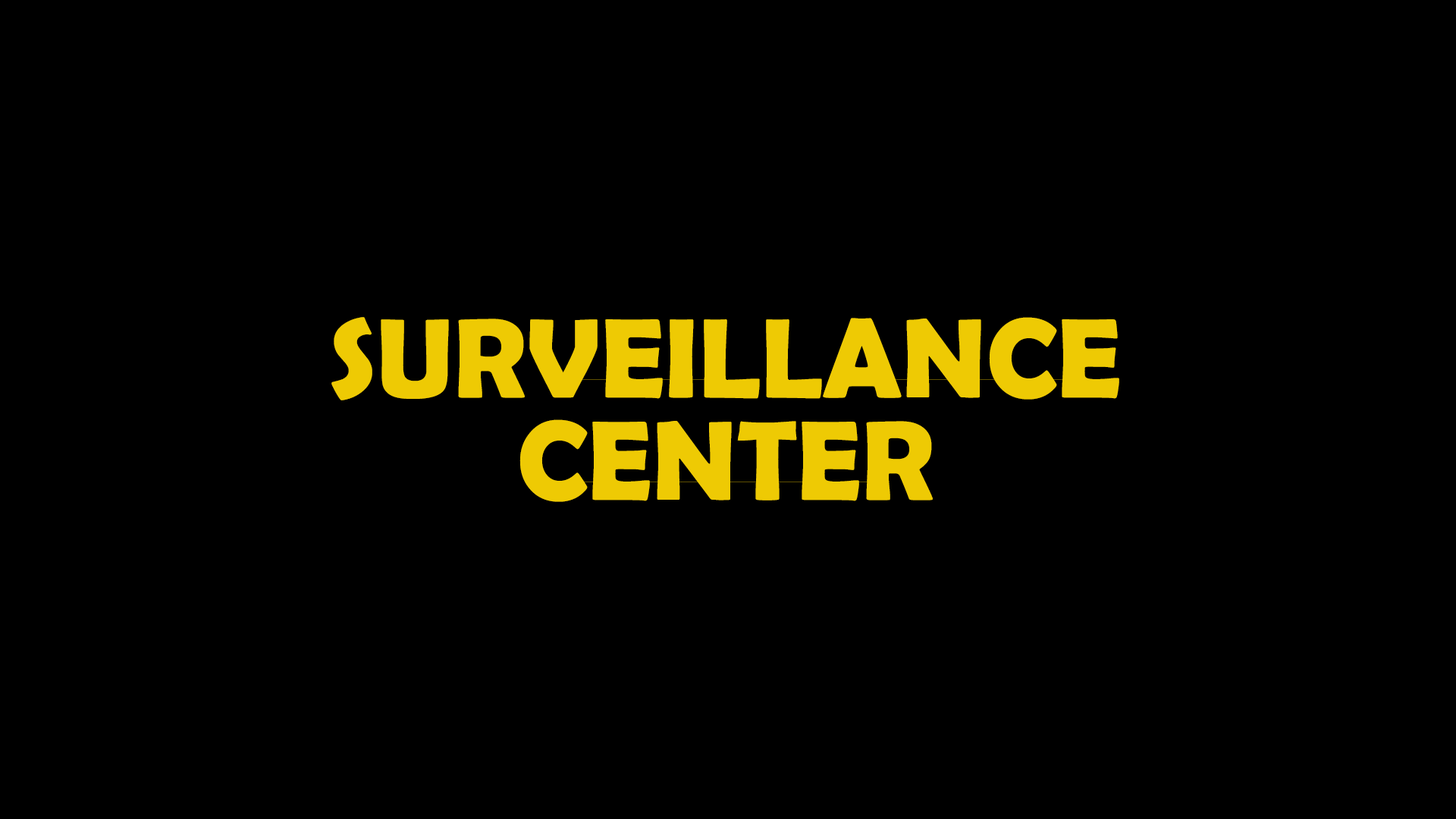
<style>
.page{position:relative;width:1456px;height:819px;background:#000000}
.page>*{position:absolute;margin:0}
.t1{font:113.7px/102.4px "BerlinSansFBDemi-Bold";color:#eeca04}
</style>
<div class="page">
<p class="t1" style="left:331px;top:317px;width:788px;height:185px;text-align:center">SURVEILLANCE<br>CENTER</p>
</div>
